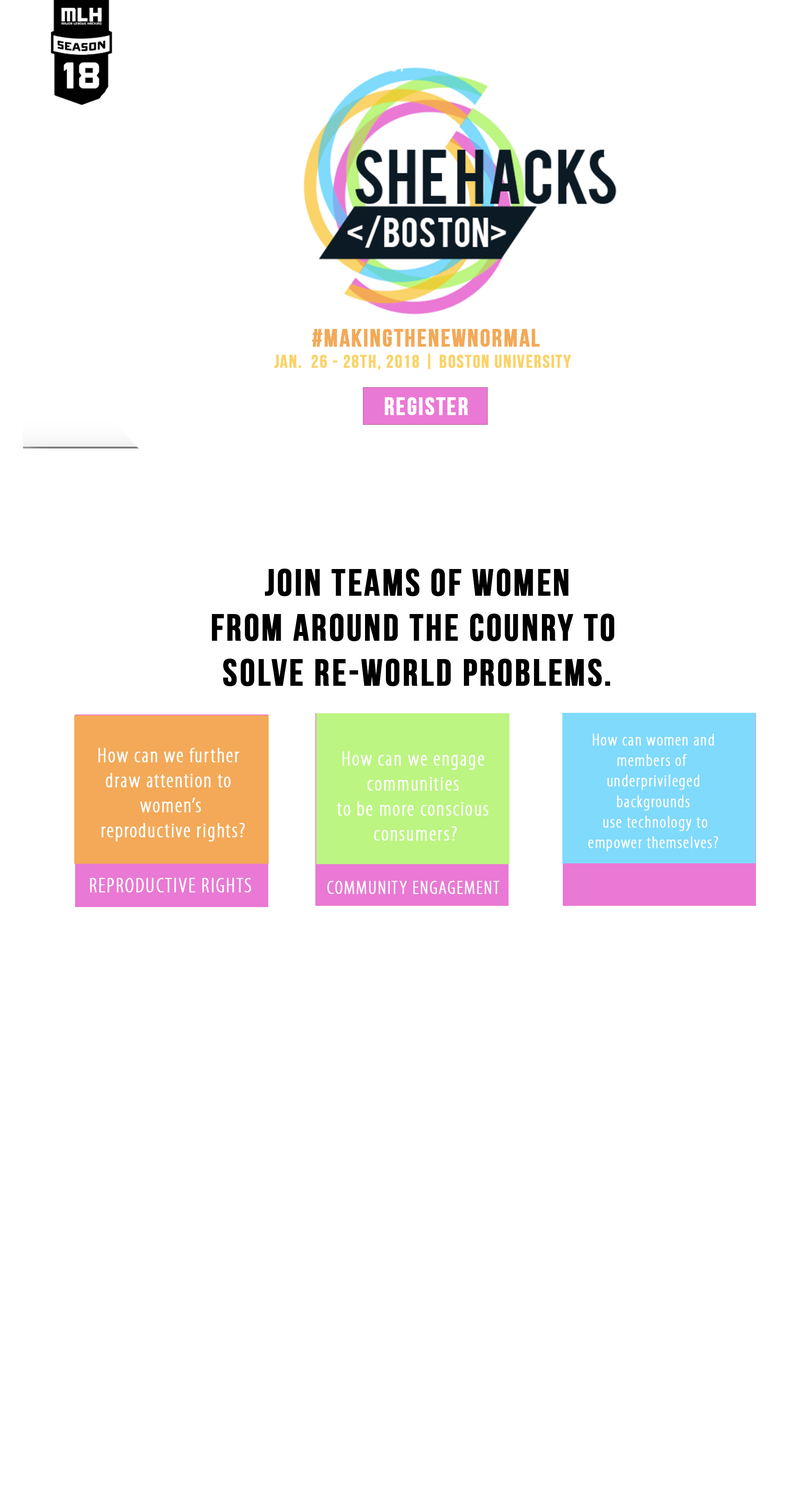
<style>
.page{position:relative;width:801px;height:1489px;background:#ffffff}
.page>*{position:absolute;margin:0}
.t1{font:25px "BebasNeue";letter-spacing:0.045em;color:#f3a957;font-weight:bold}
.t2{font:18.3px "BebasNeue";letter-spacing:0.045em;color:#fad369;font-weight:bold}
.t3{font:25px "BebasNeue";letter-spacing:0.045em;color:#ffffff;font-weight:bold}
.t4{font:37.5px "BebasNeue";letter-spacing:0.045em;color:#000000;font-weight:bold}
.t5{font:17.1px "MyriadPro-LightCond";letter-spacing:0.045em;color:#ffffff;font-weight:bold}
.t6{font:20.8px "MyriadPro-LightCond";letter-spacing:0.045em;color:#ffffff;font-weight:bold}
.t7{font:18.8px "MyriadPro-LightCond";letter-spacing:0.045em;color:#ffffff;font-weight:bold}
</style>
<div class="page">
<p class="t1" style="left:312px;top:329px;width:228px;height:18px">#makingthenewnormal</p>
<p class="t2" style="left:274px;top:354px;width:297px;height:16px">Jan.  26 - 28th, 2018 | Boston University</p>
<p class="t3" style="left:384px;top:397px;width:84px;height:18px">Register</p>
<p class="t4" style="left:212px;top:569px;width:402px;height:118px;text-align:center">Join teams of women<br>from around the counry to <br>solve re-world problems.</p>
<p class="t5" style="left:588px;top:734px;width:130px;height:118px;text-align:center">How can women and<br>members of <br>underprivileged<br>backgrounds<br> use technology to<br> empower themselves?</p>
<p class="t6" style="left:98px;top:748px;width:147px;height:94px;text-align:center">How can we further <br>draw attention to <br>women’s<br> reproductive rights?</p>
<p class="t6" style="left:336px;top:751px;width:152px;height:90px;text-align:center">How can we engage<br> communities <br>to be more conscious<br> consumers?</p>
<p class="t6" style="left:90px;top:878px;width:161px;height:15px">REPRODUCTIVE RIGHTS</p>
<p class="t7" style="left:327px;top:881px;width:172px;height:13px">COMMUNITY ENGAGEMENT</p>
</div>
